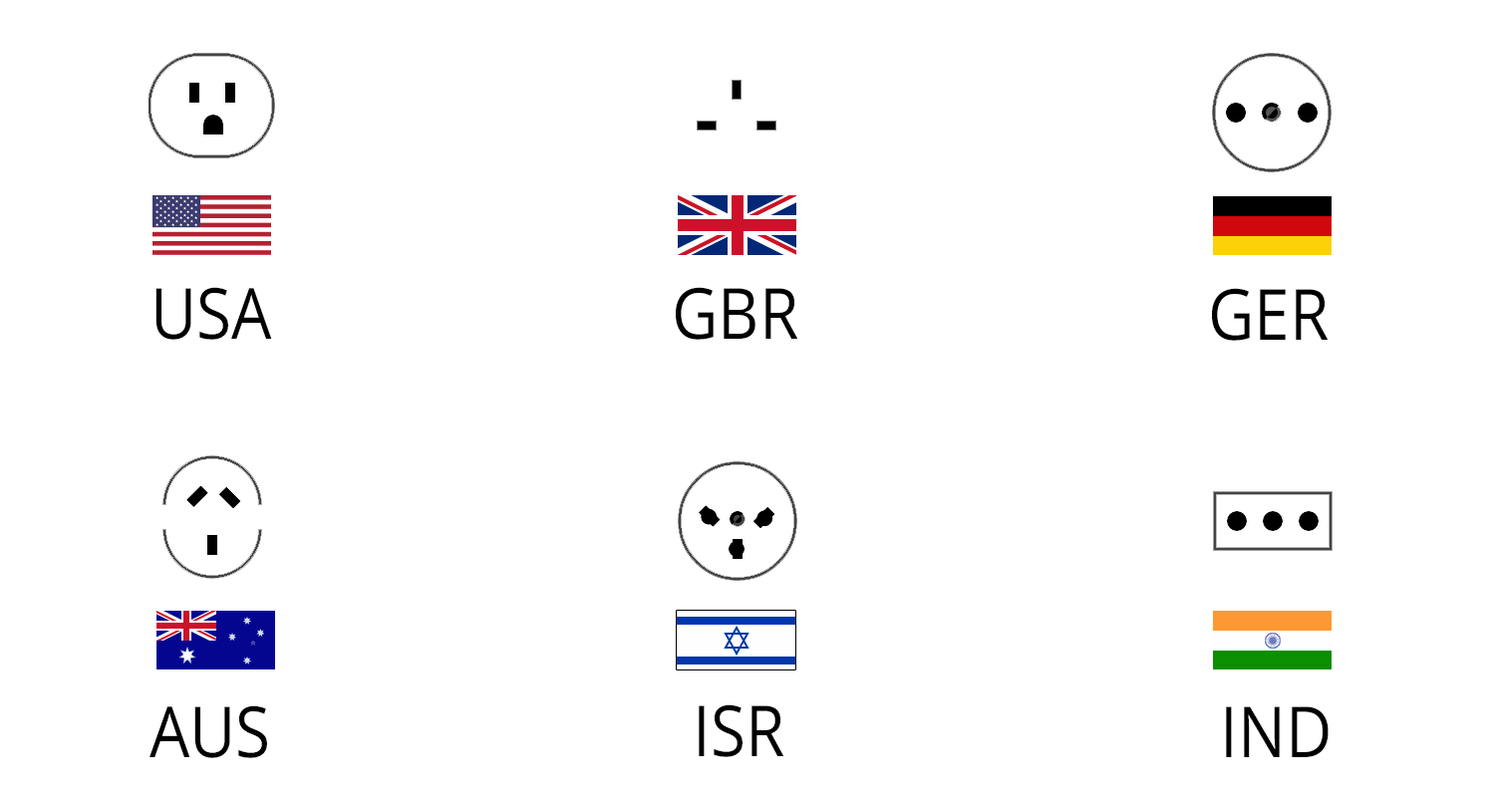
<style>
.page{position:relative;width:1495px;height:797px;background:#ffffff}
.page>*{position:absolute;margin:0}
.t1{font:70.5px "OpenSans";color:#000000;scale:0.9 1}
</style>
<div class="page">
<p class="t1" style="left:156px;top:287px;width:116px;height:53px">USA</p>
<p class="t1" style="left:676px;top:287px;width:122px;height:53px">GBR</p>
<p class="t1" style="left:1212px;top:288px;width:117px;height:53px">GER</p>
<p class="t1" style="left:150px;top:706px;width:117px;height:53px">AUS</p>
<p class="t1" style="left:699px;top:705px;width:86px;height:53px">ISR</p>
<p class="t1" style="left:1226px;top:707px;width:103px;height:51px">IND</p>
</div>
